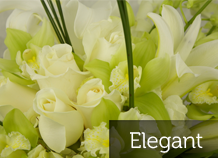
<style>
.page{position:relative;width:218px;height:158px}
.page>*{position:absolute;margin:0}
.t1{font:22.2px "Museo-300";letter-spacing:-0.01em;color:#ffffff}
</style>
<div class="page">
<p class="t1" style="left:130px;top:132px;width:73px;height:21px">Elegant</p>
</div>
